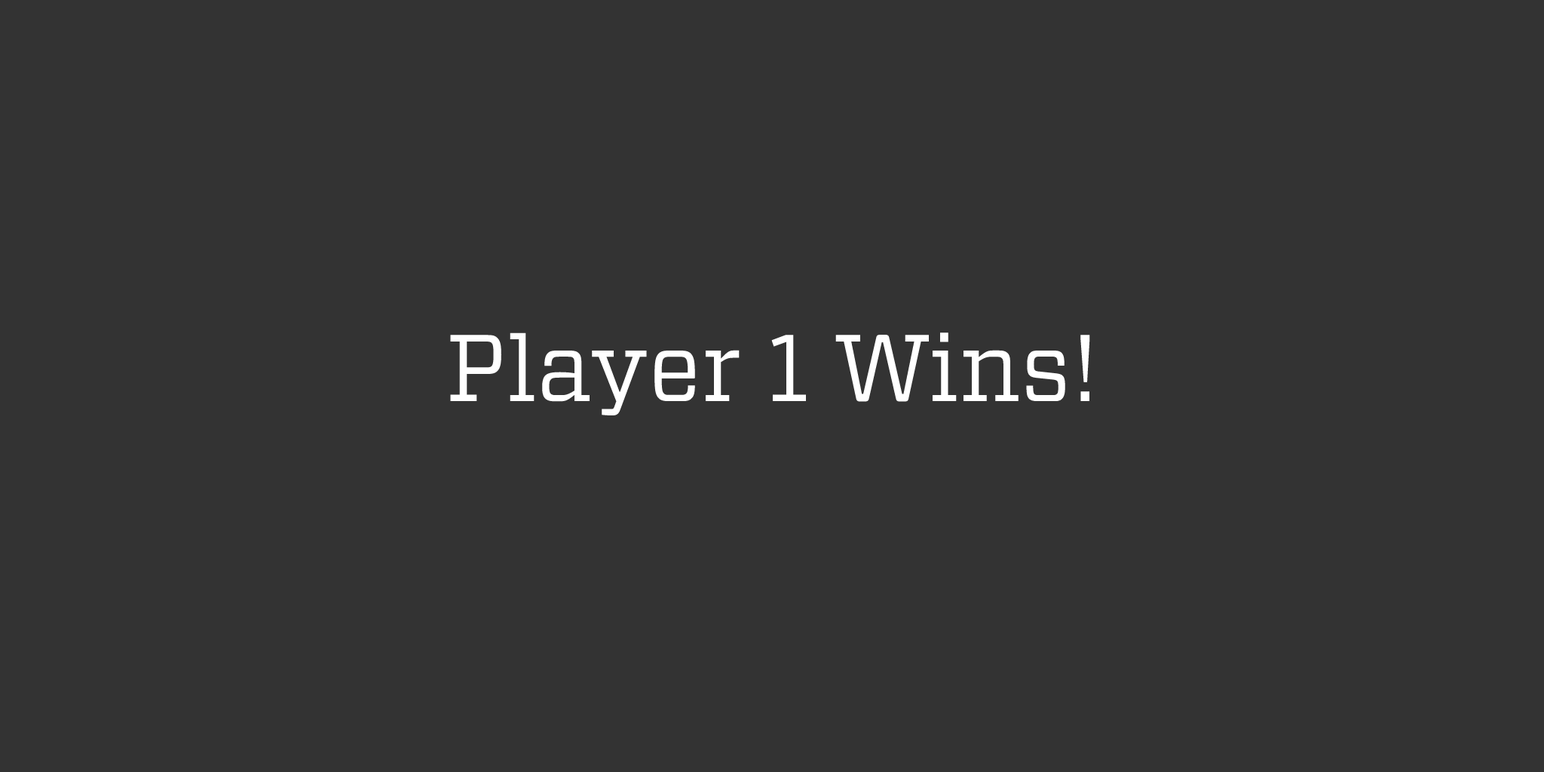
<style>
.page{position:relative;width:1544px;height:772px;background:#333333}
.page>*{position:absolute;margin:0}
.t1{font:94.3px "Vitesse-Book";color:#ffffff}
</style>
<div class="page">
<p class="t1" style="left:450px;top:333px;width:640px;height:82px">Player 1 Wins!</p>
</div>
